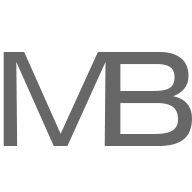
<style>
.page{position:relative;width:192px;height:192px;background:#ffffff}
.page>*{position:absolute;margin:0}
.t1{font:130.6px "Swiss721BT-RomanExtended";color:#676767}
</style>
<div class="page">
<p class="t1" style="left:3px;top:52px;width:116px;height:94px">M</p>
<p class="t1" style="left:106px;top:52px;width:86px;height:94px">B</p>
</div>
